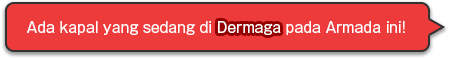
<style>
.page{position:relative;width:450px;height:58px;background:#ed3b3b}
.page>*{position:absolute;margin:0}
.t1{font:14px "GothicMB101Pro-Regular";color:#ffffff}
</style>
<div class="page">
<p class="t1" style="left:27px;top:21px;width:378px;height:14px">Ada kapal yang sedang di Dermaga pada Armada ini!</p>
<p class="t1" style="left:218px;top:21px;width:63px;height:14px">Dermaga</p>
</div>
